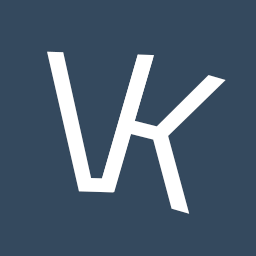
<style>
.page{position:relative;width:256px;height:256px;background:#34495e}
.page>*{position:absolute;margin:0}
.t1{font:200px "TitilliumWeb-Regular";color:#ffffff}
</style>
<div class="page">
<p class="t1" style="left:47px;top:51px;width:107px;height:142px;rotate:2deg">V</p>
<p class="t1" style="left:99px;top:54px;width:127px;height:160px;rotate:16deg">K</p>
</div>
